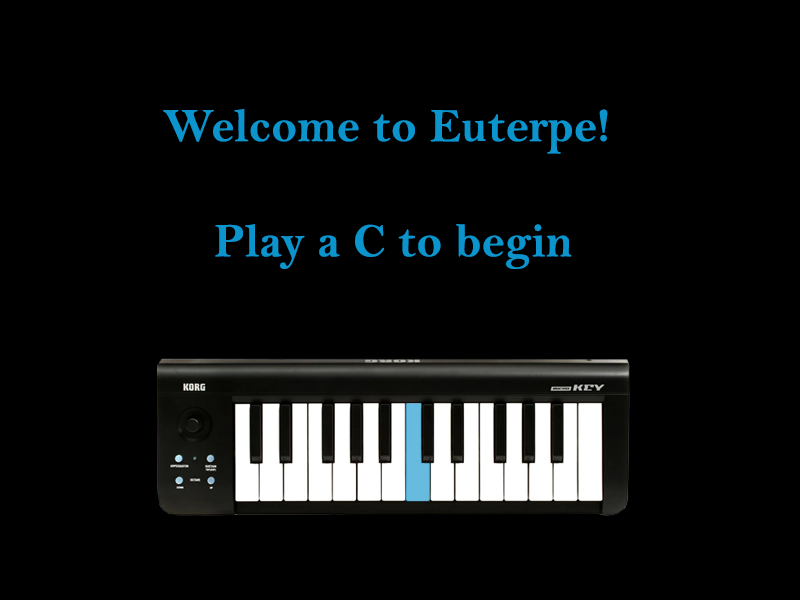
<style>
.page{position:relative;width:800px;height:600px;background:#000000}
.page>*{position:absolute;margin:0}
.t1{font:48px "BellMTBold";color:#0c94cd}
</style>
<div class="page">
<p class="t1" style="left:163px;top:108px;width:445px;height:161px;text-align:center">Welcome to Euterpe! <br><br>Play a C to begin</p>
</div>
